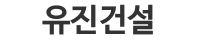
<style>
.page{position:relative;width:200px;height:40px;background:#ffffff}
.page>*{position:absolute;margin:0}
.t1{font:32px "NanumBarunGothicOTFBold";color:#333333}
</style>
<div class="page">
<p class="t1" style="left:42px;top:4px;width:111px;height:31px">유진건설</p>
</div>
